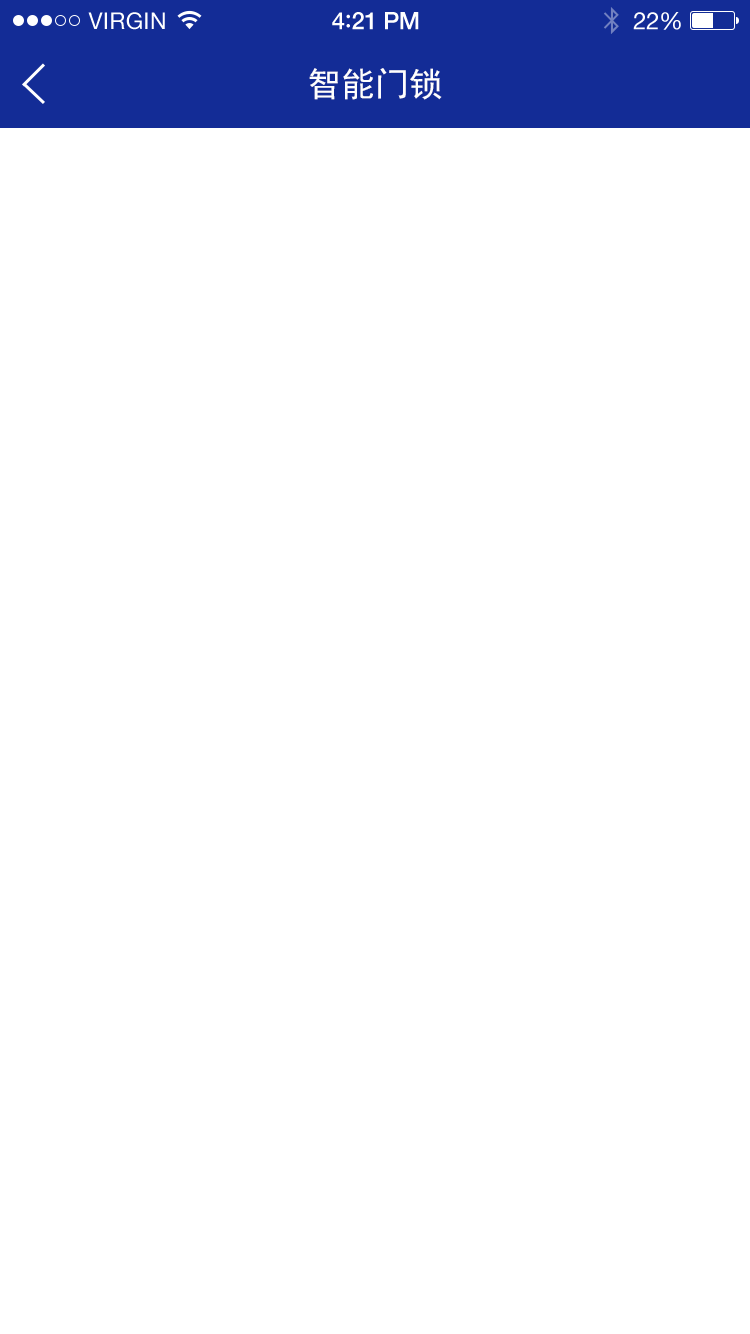
<style>
.page{position:relative;width:750px;height:1334px;background:#ffffff}
.page>*{position:absolute;margin:0}
.t1{font:34px "SimHei";color:#fefefe}
</style>
<div class="page">
<p class="t1" style="left:309px;top:68px;width:133px;height:32px">智能门锁</p>
</div>
